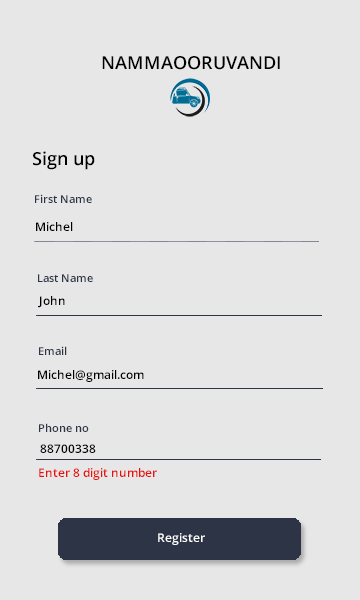
<style>
.page{position:relative;width:360px;height:600px;background:#e7e7e7}
.page>*{position:absolute;margin:0}
.t1{font:18px "OpenSans-Semibold";color:#000000}
.t2{font:18px "OpenSans-Semibold";color:#020000}
.t3{font:11px "OpenSans-Semibold";color:#2c3445}
.t4{font:12px "OpenSans-Semibold";color:#000000}
.t5{font:12px "OpenSans-Semibold";color:#020101}
.t6{font:12px "OpenSans-Semibold";color:#e80f0f}
.t7{font:12px "OpenSans-Semibold";color:#ffffff}
</style>
<div class="page">
<p class="t1" style="left:102px;top:56px;width:178px;height:14px">NAMMAOORUVANDI</p>
<p class="t2" style="left:33px;top:151px;width:62px;height:19px">Sign up</p>
<p class="t3" style="left:35px;top:194px;width:57px;height:9px">First Name</p>
<p class="t4" style="left:36px;top:222px;width:37px;height:9px">Michel</p>
<p class="t3" style="left:38px;top:274px;width:55px;height:8px">Last Name</p>
<p class="t4" style="left:38px;top:296px;width:27px;height:12px">John</p>
<p class="t3" style="left:39px;top:346px;width:28px;height:9px">Email</p>
<p class="t4" style="left:38px;top:370px;width:106px;height:12px">Michel@gmail.com</p>
<p class="t3" style="left:39px;top:423px;width:50px;height:9px">Phone no</p>
<p class="t5" style="left:40px;top:444px;width:56px;height:9px">88700338</p>
<p class="t6" style="left:39px;top:468px;width:118px;height:12px">Enter 8 digit number</p>
<p class="t7" style="left:158px;top:533px;width:47px;height:12px">Register</p>
</div>
